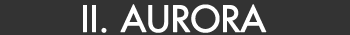
<style>
.page{position:relative;width:350px;height:35px;background:#333333}
.page>*{position:absolute;margin:0}
.t1{font:35px "Futura";color:#ffffff;font-weight:bold}
</style>
<div class="page">
<p class="t1" style="left:83px;top:4px;width:184px;height:29px">II. AURORA</p>
</div>
